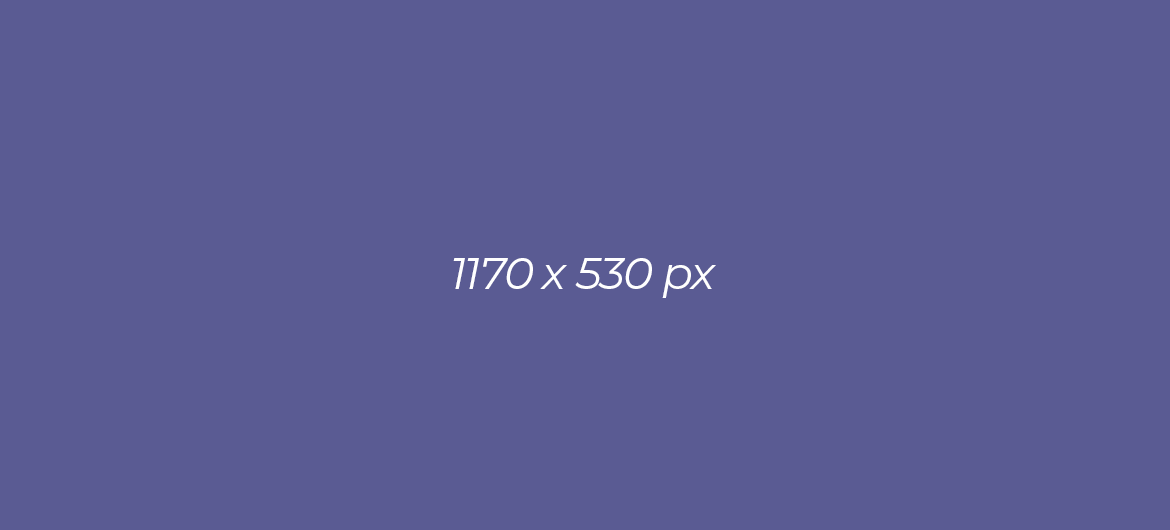
<style>
.page{position:relative;width:1170px;height:530px;background:#5a5b93}
.page>*{position:absolute;margin:0}
.t1{font:45px "Montserrat-Italic";letter-spacing:-0.03em;color:#ffffff}
</style>
<div class="page">
<p class="t1" style="left:453px;top:258px;width:263px;height:40px">1170 x 530 px</p>
</div>
